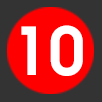
<style>
.page{position:relative;width:102px;height:102px;background:#333333}
.page>*{position:absolute;margin:0}
.t1{font:65.5px "AvantGarde-Demi";color:#ffffff}
</style>
<div class="page">
<p class="t1" style="left:21px;top:25px;width:62px;height:51px">10</p>
</div>
